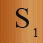
<style>
.page{position:relative;width:43px;height:43px}
.page>*{position:absolute;margin:0}
.t1{font:30px "TimesNewRomanPSMT";color:#0c0c0b}
.t2{font:12px "TimesNewRomanPSMT";color:#0c0c0b}
</style>
<div class="page">
<p class="t1" style="left:15px;top:8px;width:14px;height:20px">S</p>
<p class="t2" style="left:34px;top:28px;width:4px;height:9px">1</p>
</div>
